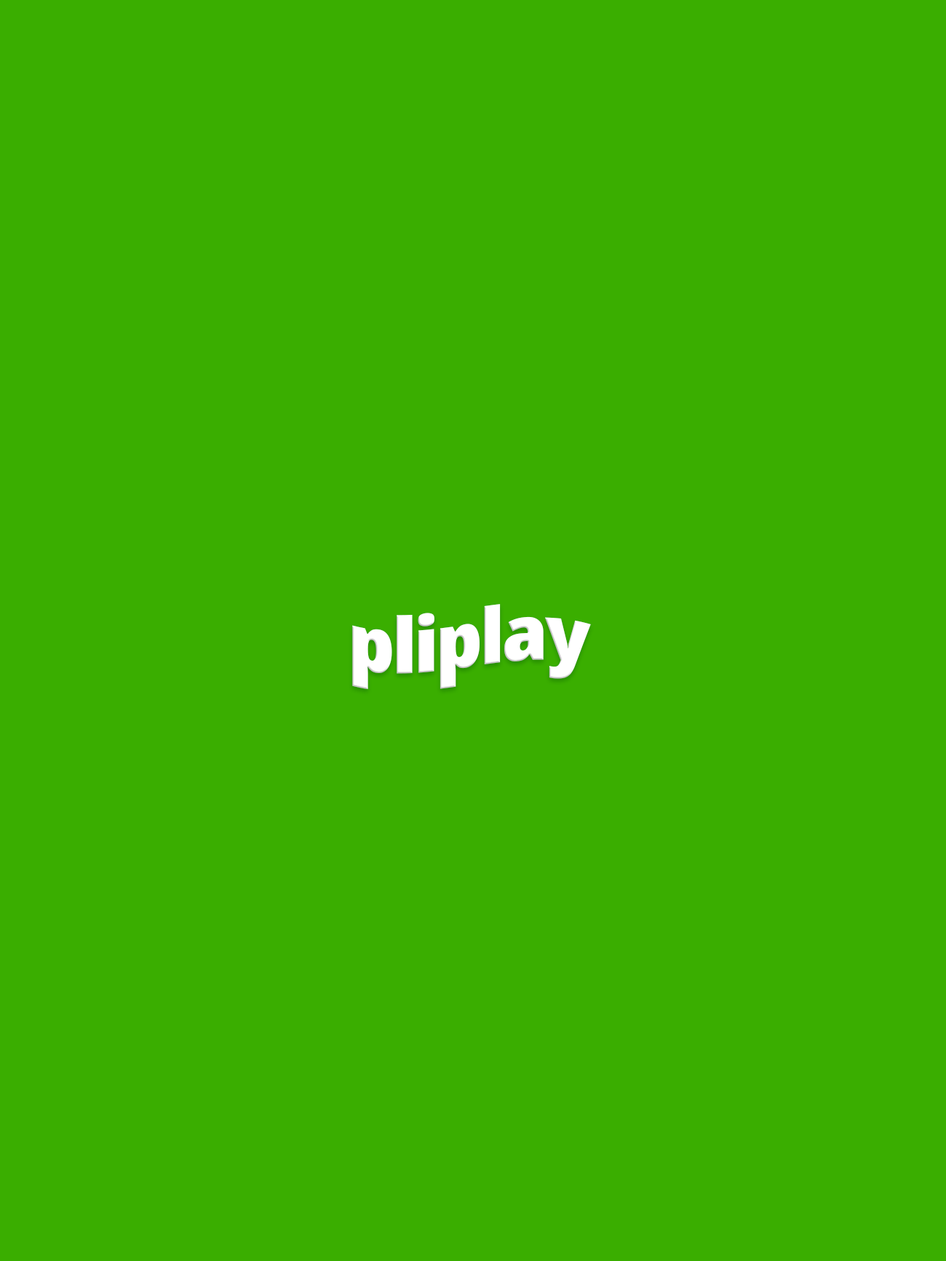
<style>
.page{position:relative;width:946px;height:1261px;background:#3aae00}
.page>*{position:absolute;margin:0}
.t1{font:76.3px "NotoSansDisplay-Black";letter-spacing:-0.03em;color:#ffffff}
</style>
<div class="page">
<p class="t1" style="left:352px;top:604px;width:239px;height:86px">pliplay</p>
</div>
